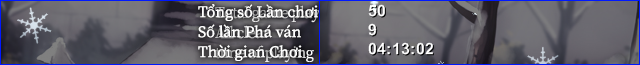
<style>
.page{position:relative;width:640px;height:65px}
.page>*{position:absolute;margin:0}
.t1{font:16px/20px "SourceSerifRoman-Regular";color:#ffffff}
</style>
<div class="page">
<p class="t1" style="left:198px;top:4px;width:120px;height:57px">Tổng số Lần chơi<br>Số lần Phá ván<br>Thời gian Chơi</p>
</div>
